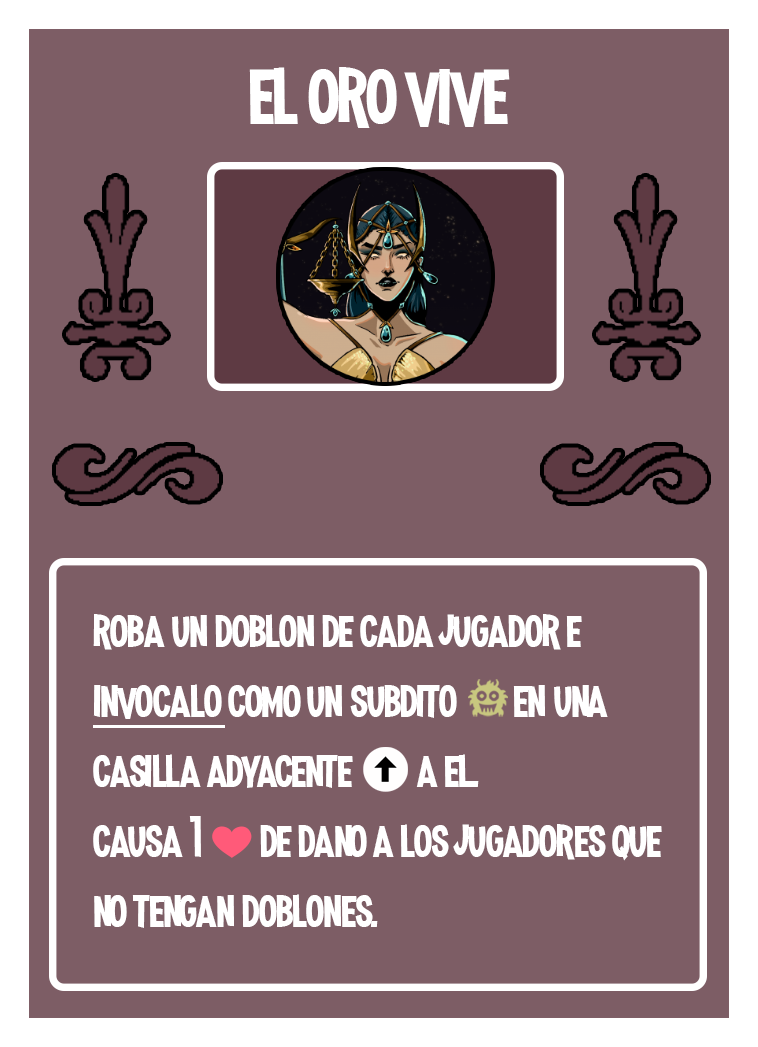
<style>
.page{position:relative;width:758px;height:1047px;background:#7d5d65}
.page>*{position:absolute;margin:0}
.t1{font:100px "MadnessHyperactive";color:#ffffff}
.t2{font:58.3px "MadnessHyperactive";color:#ffffff}
.t3{font:41.7px "EmojiOneColor";color:#ffffff}
</style>
<div class="page">
<p class="t1" style="left:249px;top:67px;width:261px;height:61px">el oro vive</p>
<p class="t2" style="left:93px;top:614px;width:569px;height:314px">roba un doblon de cada jugador e invocalo como un subdito       en una casilla adyacente        a el.<br>causa 1 <span class="t3">❤️ </span>de dano a los jugadores que no tengan doblones.</p>
</div>
